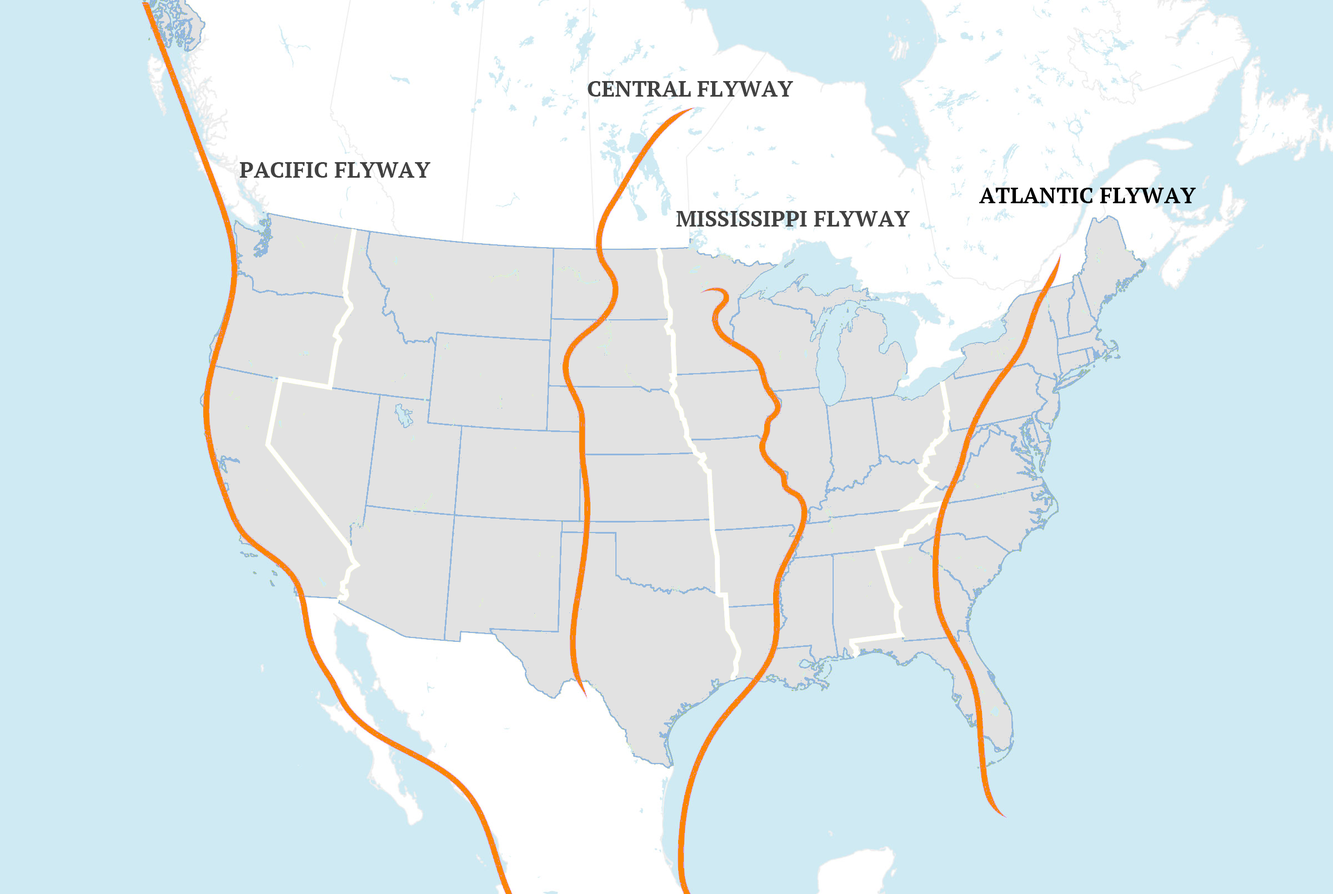
<style>
.page{position:relative;width:1333px;height:894px;background:#cfeaf3}
.page>*{position:absolute;margin:0}
.t1{font:22.2px "PTSerif-Bold";color:#414141}
.t2{font:22.2px "PTSerif-Bold";color:#000000}
</style>
<div class="page">
<p class="t1" style="left:588px;top:81px;width:205px;height:16px">CENTRAL FLYWAY</p>
<p class="t1" style="left:239px;top:162px;width:192px;height:16px">PACIFIC FLYWAY</p>
<p class="t2" style="left:979px;top:188px;width:217px;height:15px">ATLANTIC FLYWAY</p>
<p class="t1" style="left:676px;top:211px;width:234px;height:16px">MISSISSIPPI FLYWAY</p>
</div>
